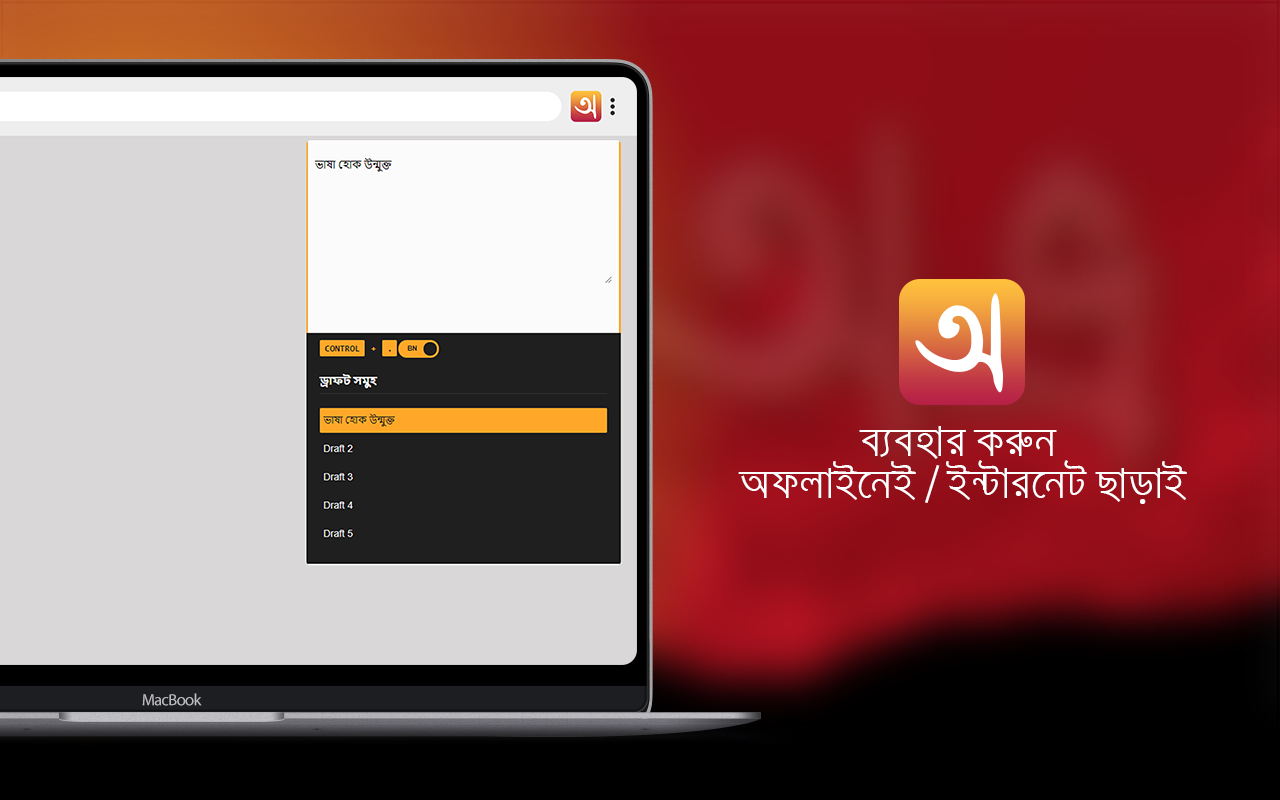
<style>
.page{position:relative;width:1280px;height:800px}
.page>*{position:absolute;margin:0}
.t1{font:35.2px "SiyamRupaliANSI";color:#ffffff}
.t2{font:16.4px "MyriadPro-Regular";letter-spacing:-0.04em;color:#bebdc2}
</style>
<div class="page">
<p class="t1" style="left:738px;top:426px;width:449px;height:78px;text-align:center">e¨envi Ki“b <br>AdjvB‡bB / B›Uvi‡bU QvovB</p>
<p class="t2" style="left:142px;top:693px;width:60px;height:13px">MacBook</p>
</div>
